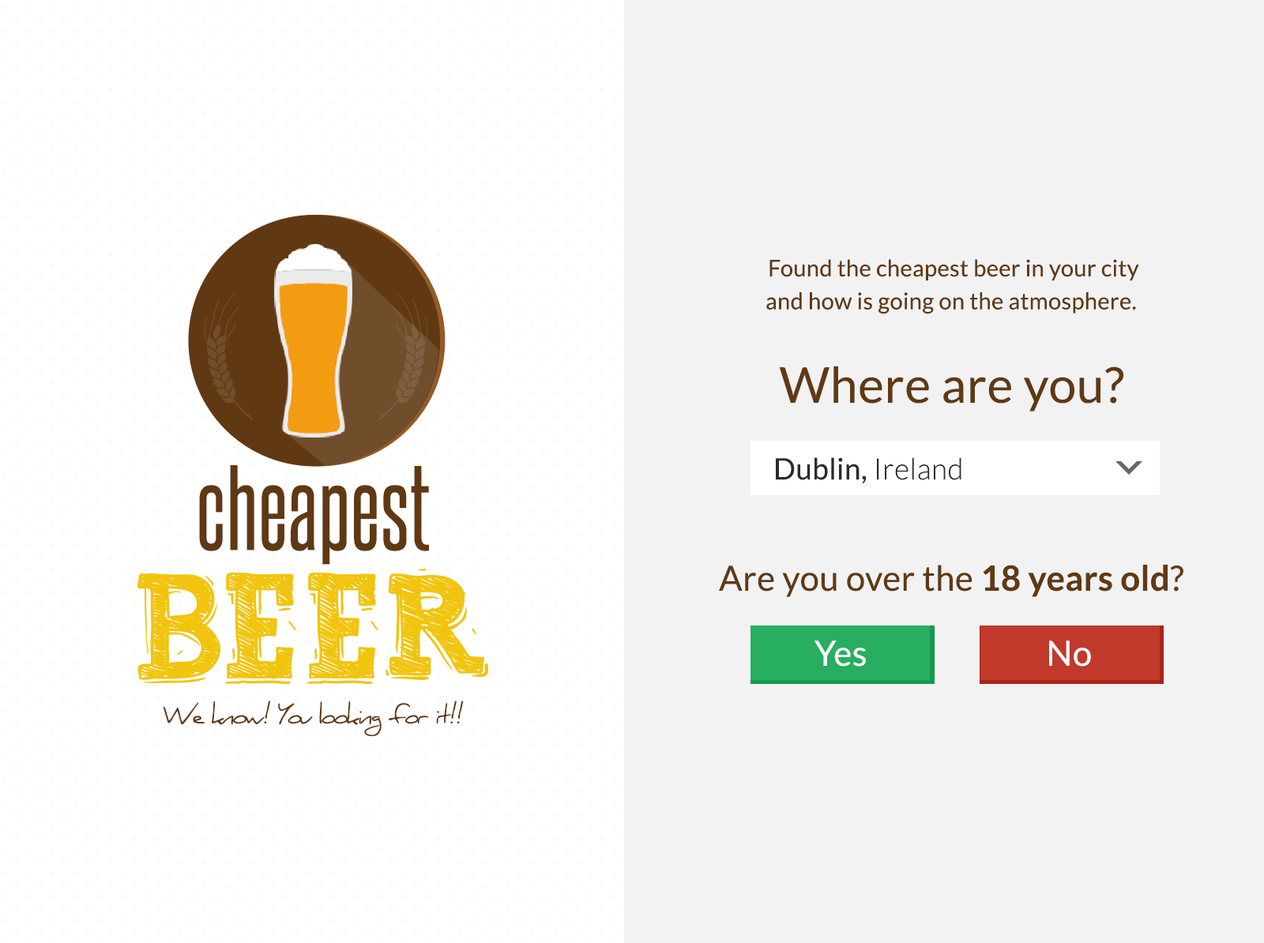
<style>
.page{position:relative;width:1264px;height:943px;background:#f2f2f2}
.page>*{position:absolute;margin:0}
.t1{font:23px/32.9px "Lato-Regular";letter-spacing:0.01em;color:#603913}
.t2{font:49.4px "Lato-Regular";letter-spacing:0.01em;color:#603913}
.t3{font:29.5px "Lato-Regular";letter-spacing:0.01em;color:#2b2b2b}
.t4{font:29.5px "Lato-Light";letter-spacing:0.01em;color:#2b2b2b}
.t5{font:103px "SteelfishRg-Regular";letter-spacing:0.01em;color:#603913}
.t6{font:34.8px "Lato-Regular";letter-spacing:0.01em;color:#603913}
.t7{font:34.8px "Lato-Bold";letter-spacing:0.01em;color:#603913}
.t8{font:34.8px "Lato-Regular";letter-spacing:0.01em;color:#ffffff}
.t9{font:24.6px "Daniel";letter-spacing:-0.09em;color:#603913}
</style>
<div class="page">
<p class="t1" style="left:766px;top:259px;width:373px;height:55px;text-align:center">Found the cheapest beer in your city<br>and how is going on the atmosphere.</p>
<p class="t2" style="left:779px;top:366px;width:344px;height:46px">Where are you?</p>
<p class="t3" style="left:776px;top:457px;width:185px;height:27px">Dublin, <span class="t4">Ireland</span></p>
<p class="t5" style="left:199px;top:465px;width:230px;height:100px">cheapest</p>
<p class="t6" style="left:719px;top:565px;width:464px;height:32px">Are you over the <span class="t7">18 years old</span>?</p>
<p class="t8" style="left:815px;top:641px;width:51px;height:26px">Yes</p>
<p class="t8" style="left:1049px;top:641px;width:42px;height:26px">No</p>
<p class="t9" style="left:163px;top:701px;width:301px;height:35px">We know! You looking for it!!</p>
</div>
